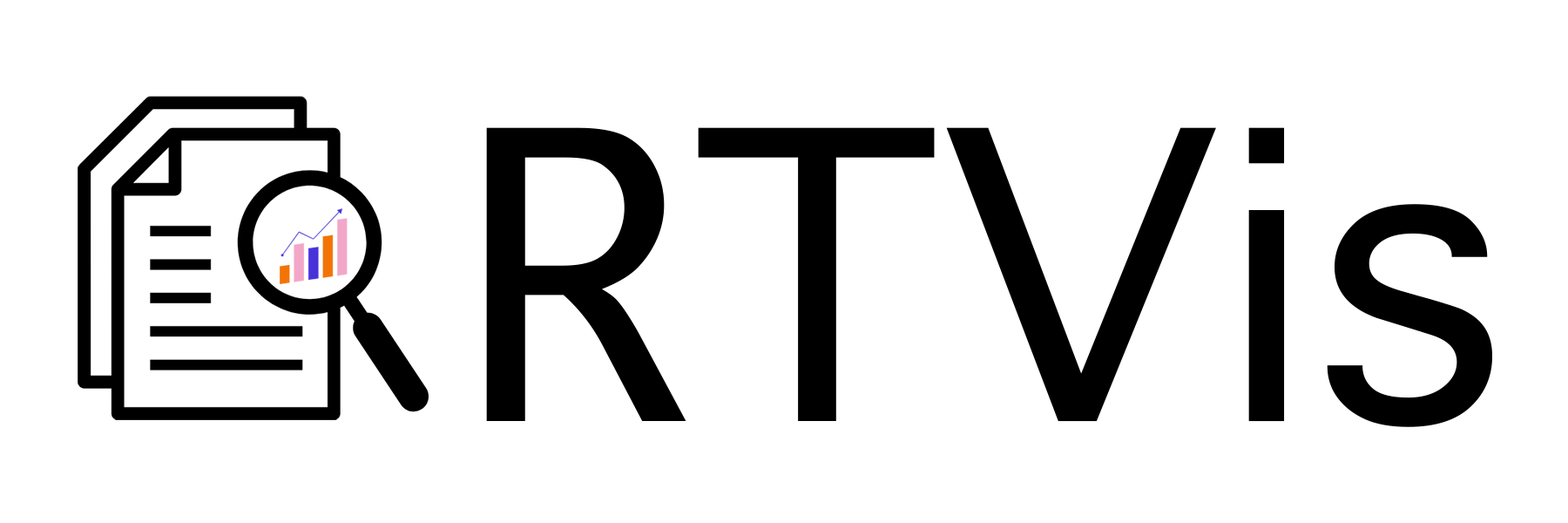
<style>
.page{position:relative;width:1568px;height:523px;background:#ffffff}
.page>*{position:absolute;margin:0}
.t1{font:544.4px "AppleSymbols";color:#000000}
</style>
<div class="page">
<p class="t1" style="left:486px;top:127px;width:1006px;height:300px">RTVis</p>
</div>
